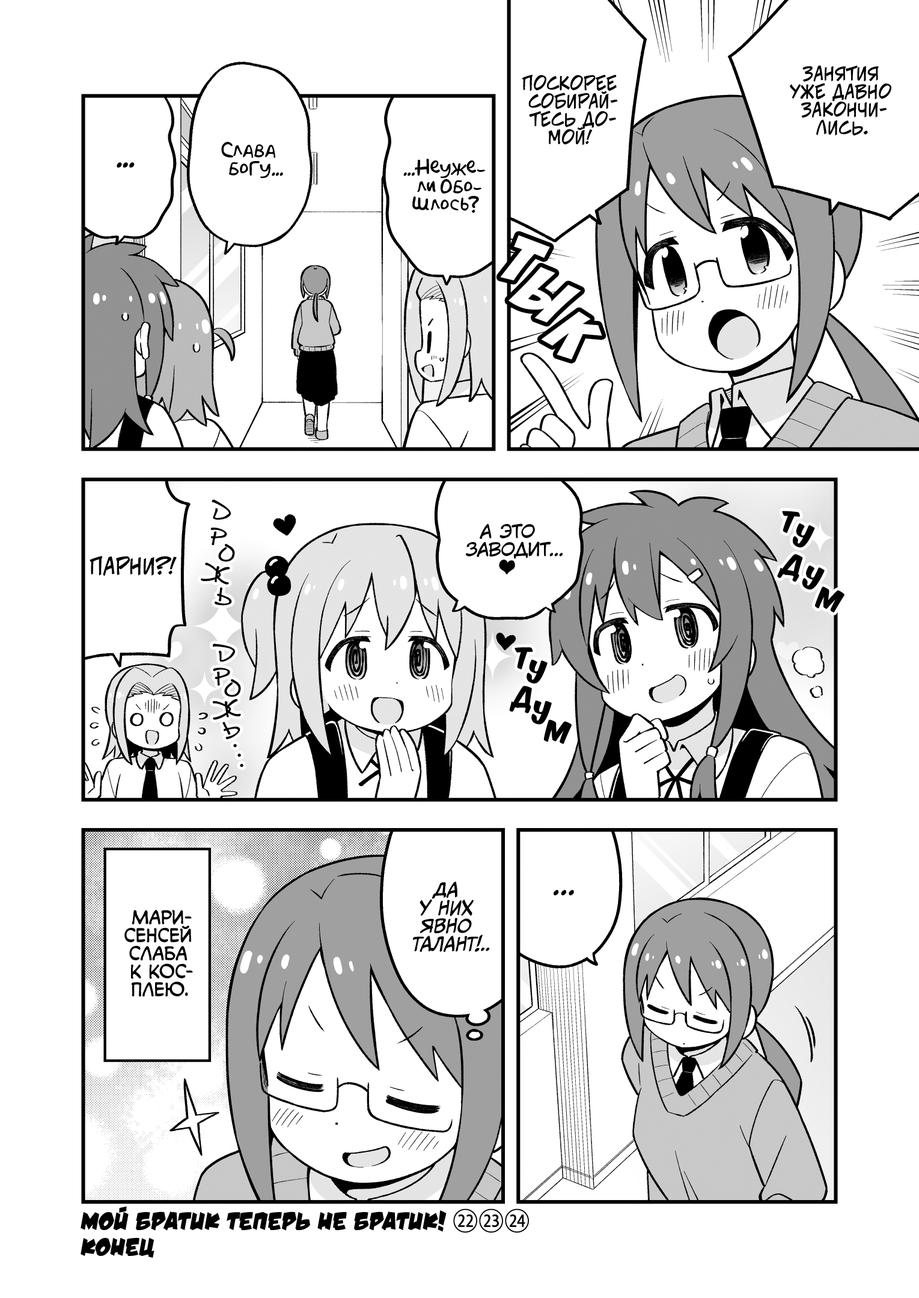
<style>
.page{position:relative;width:919px;height:1298px;background:#ffffff}
.page>*{position:absolute;margin:0}
.t1{font:18px "v_CCJeffCampbell";color:#000000;text-transform:uppercase}
.t2{font:18px "AkbarPlain";color:#000000}
.t3{font:28.8px "AkbarPlain";color:#000000}
.t4{font:72.1px "BadaBoom";color:#ffffff;scale:1.2 1}
.t5{font:25.2px "DSNote";color:#000000;text-transform:uppercase;font-weight:bold}
.t6{font:25.2px "KomikaTitle-AxisRUS-LAT";color:#000000}
.t7{font:18px "KuraiVoice2";color:#000000;text-transform:uppercase}
.t8{font:27px "KomikaTitle-AxisRUS-LAT";color:#000000}
.t9{font:21.6px "v_CCJeffCampbell";color:#000000;text-transform:uppercase}
.t10{font:18px "DSNote";color:#000000;text-transform:uppercase;font-weight:bold}
.t11{font:18px "CCMeanwhile";color:#000000;text-transform:uppercase;font-style:italic}
.t12{font:28.8px "KuraiVoice2";color:#000000;text-transform:uppercase}
.t13{font:18px "v_CCMonologous";color:#000000;text-transform:uppercase}
.t14{font:25.2px "v_DamnNoisyKids";color:#000000;text-transform:uppercase}
.t15{font:25.2px "KozGoPr6N-Regular";color:#000000;text-transform:uppercase;font-weight:bold}
</style>
<div class="page">
<p class="t1" style="left:790px;top:65px;width:101px;height:71px;text-align:center">Занятия<br>уже давно<br>закончи-<br>лись.</p>
<p class="t1" style="left:522px;top:75px;width:96px;height:70px;text-align:center">Поскорее<br>собирай-<br>тесь до-<br>мой!</p>
<p class="t2" style="left:221px;top:142px;width:62px;height:36px;text-align:center">Слава<br>богу...</p>
<p class="t2" style="left:403px;top:159px;width:83px;height:54px;text-align:center">...Неуже-<br>ли Обо-<br>шлось?</p>
<p class="t3" style="left:117px;top:162px;width:18px;height:6px">...</p>
<p class="t4" style="left:500px;top:235px;width:50px;height:46px;rotate:26deg">т</p>
<p class="t4" style="left:508px;top:267px;width:73px;height:56px;rotate:34deg">ы</p>
<p class="t4" style="left:541px;top:311px;width:61px;height:48px;rotate:42deg">к</p>
<p class="t5" style="left:212px;top:499px;width:19px;height:21px;rotate:4deg">д</p>
<p class="t6" style="left:782px;top:511px;width:18px;height:22px;rotate:10deg">т</p>
<p class="t5" style="left:210px;top:528px;width:17px;height:18px;rotate:11deg">р</p>
<p class="t7" style="left:466px;top:523px;width:96px;height:51px;text-align:center">А это<br>заводит...<br>♥</p>
<p class="t8" style="left:792px;top:523px;width:23px;height:24px;rotate:15deg">у</p>
<p class="t5" style="left:218px;top:544px;width:17px;height:18px">о</p>
<p class="t9" style="left:90px;top:556px;width:87px;height:20px">Парни?!</p>
<p class="t6" style="left:777px;top:554px;width:26px;height:28px;rotate:14deg">д</p>
<p class="t5" style="left:201px;top:562px;width:29px;height:23px;rotate:8deg">ж</p>
<p class="t8" style="left:802px;top:565px;width:22px;height:24px;rotate:16deg">у</p>
<p class="t5" style="left:215px;top:587px;width:17px;height:19px;rotate:6deg">ь</p>
<p class="t6" style="left:815px;top:586px;width:29px;height:26px;rotate:15deg">м</p>
<p class="t5" style="left:213px;top:644px;width:22px;height:18px;rotate:-18deg">д</p>
<p class="t6" style="left:514px;top:647px;width:19px;height:22px;rotate:5deg">т</p>
<p class="t8" style="left:526px;top:659px;width:21px;height:25px;rotate:10deg">у</p>
<p class="t5" style="left:213px;top:668px;width:17px;height:18px;rotate:-2deg">р</p>
<p class="t5" style="left:224px;top:679px;width:17px;height:18px">о</p>
<p class="t6" style="left:509px;top:686px;width:23px;height:27px;rotate:6deg">д</p>
<p class="t5" style="left:212px;top:699px;width:29px;height:21px;rotate:-8deg">ж</p>
<p class="t8" style="left:531px;top:700px;width:21px;height:25px;rotate:7deg">у</p>
<p class="t5" style="left:222px;top:722px;width:18px;height:18px;rotate:-27deg">ь</p>
<p class="t6" style="left:543px;top:719px;width:28px;height:25px;rotate:8deg">м</p>
<p class="t10" style="left:233px;top:744px;width:4px;height:3px">.</p>
<p class="t10" style="left:237px;top:754px;width:4px;height:3px">.</p>
<p class="t10" style="left:240px;top:764px;width:3px;height:3px">.</p>
<p class="t11" style="left:413px;top:881px;width:77px;height:71px;text-align:center">Да<br>у них<br>явно<br>талант!..</p>
<p class="t12" style="left:553px;top:890px;width:21px;height:5px">...</p>
<p class="t13" style="left:124px;top:910px;width:69px;height:87px;text-align:center">Мари-<br>сенсей<br>слаба<br>к кос-<br>плею.</p>
<p class="t14" style="left:81px;top:1206px;width:448px;height:27px">Мой братик теперь не братик! <span class="t15">㉒㉓㉔</span></p>
<p class="t14" style="left:81px;top:1238px;width:73px;height:20px">Конец</p>
</div>
